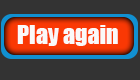
<style>
.page{position:relative;width:140px;height:80px;background:#333333}
.page>*{position:absolute;margin:0}
.t1{font:24px "Impact";color:#faf9f9}
</style>
<div class="page">
<p class="t1" style="left:17px;top:25px;width:101px;height:21px">Play again</p>
</div>
